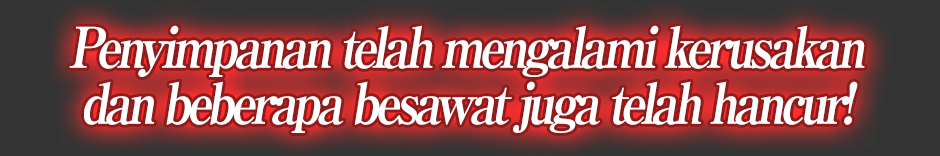
<style>
.page{position:relative;width:940px;height:156px}
.page>*{position:absolute;margin:0}
.t1{font:56px/56px "RyuminPro-ExBold";letter-spacing:-0.1em;color:#ffffff;font-style:italic;scale:0.9 1}
</style>
<div class="page">
<p class="t1" style="left:69px;top:25px;width:796px;height:108px;text-align:center">Penyimpanan telah mengalami kerusakan<br>dan beberapa besawat juga telah hancur!</p>
</div>
